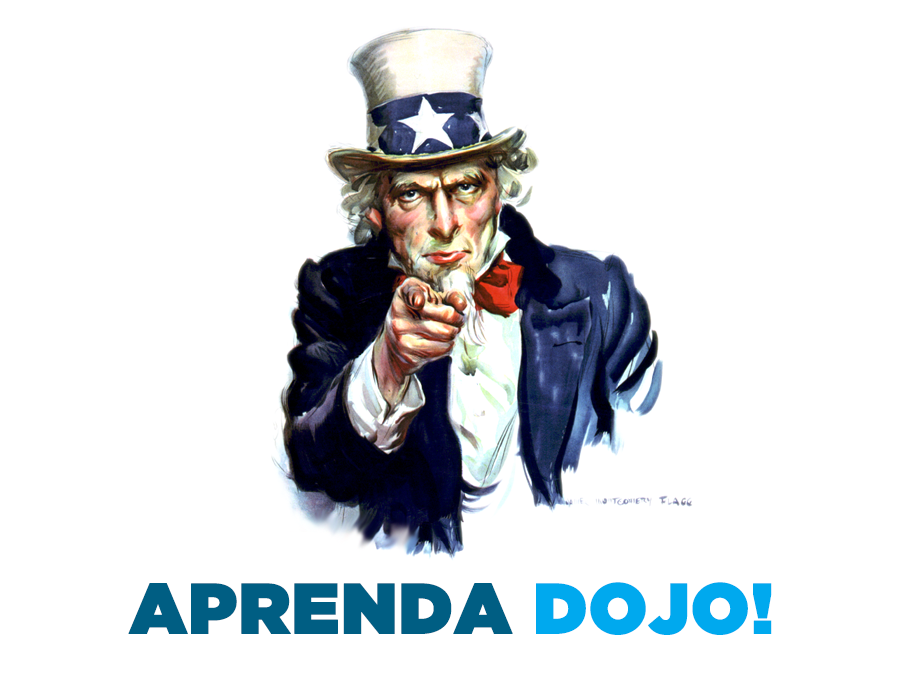
<style>
.page{position:relative;width:900px;height:700px;background:#ffffff}
.page>*{position:absolute;margin:0}
.t1{font:71.2px "GothamUltra";color:#005e83;font-weight:bold}
.t2{font:71.2px "GothamUltra";color:#00a9ee;font-weight:bold}
</style>
<div class="page">
<p class="t1" style="left:128px;top:582px;width:644px;height:53px">APRENDA <span class="t2">DOJO!</span></p>
</div>
